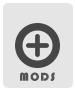
<style>
.page{position:relative;width:75px;height:90px;background:#e5e5e5}
.page>*{position:absolute;margin:0}
.t1{font:12px "Bauhaus93";letter-spacing:0.1em;color:#555555}
</style>
<div class="page">
<p class="t1" style="left:20px;top:72px;width:35px;height:9px">MODS</p>
</div>
